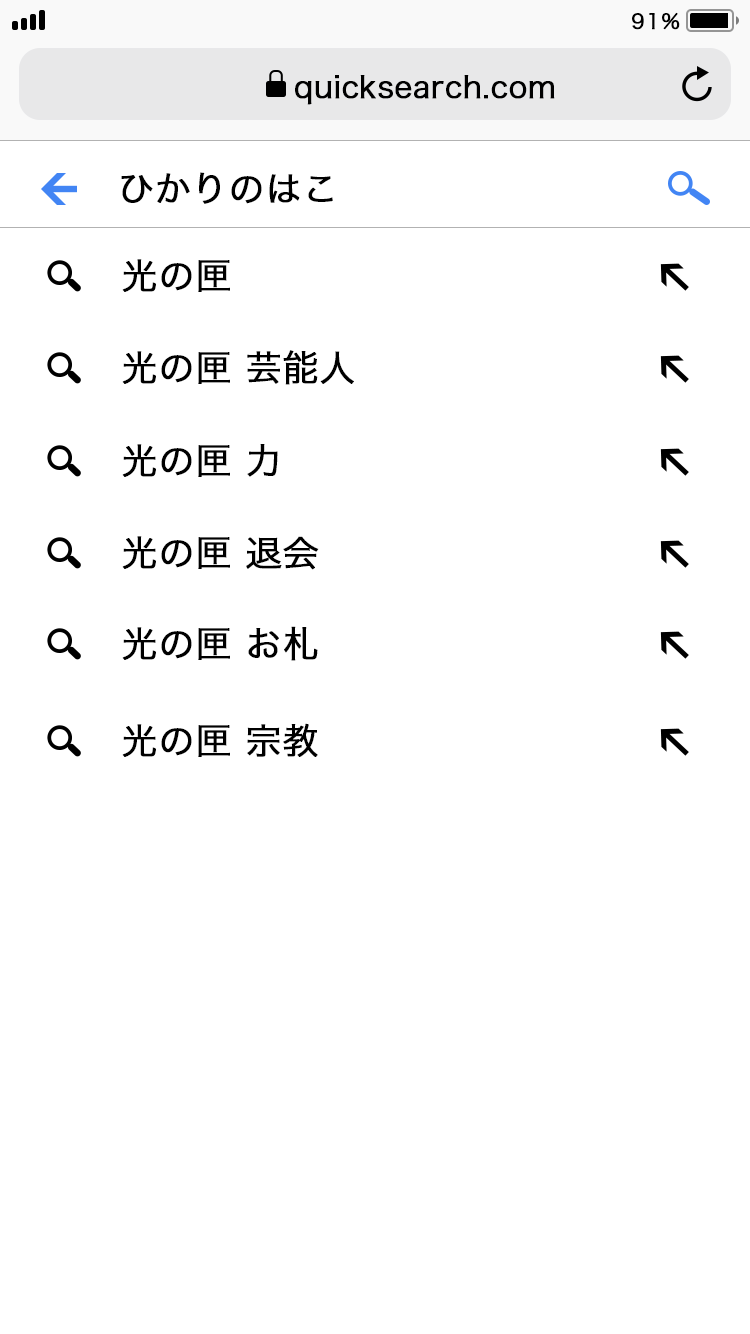
<style>
.page{position:relative;width:750px;height:1334px;background:#ffffff}
.page>*{position:absolute;margin:0}
.t1{font:20.7px "HiraginoSans-W3";letter-spacing:0.05em;color:#000000;font-weight:bold}
.t2{font:30px "HiraginoSans-W3";color:#000000;font-weight:bold}
.t3{font:36px "HiraginoSans-W3";color:#000000;font-weight:bold}
</style>
<div class="page">
<p class="t1" style="left:632px;top:12px;width:48px;height:18px">91%</p>
<p class="t2" style="left:295px;top:75px;width:260px;height:30px">quicksearch.com</p>
<p class="t3" style="left:121px;top:172px;width:212px;height:32px">ひかりのはこ</p>
<p class="t3" style="left:122px;top:259px;width:108px;height:33px">光の匣</p>
<p class="t3" style="left:122px;top:350px;width:232px;height:35px">光の匣 芸能人</p>
<p class="t3" style="left:122px;top:444px;width:156px;height:33px">光の匣 力</p>
<p class="t3" style="left:122px;top:536px;width:197px;height:34px">光の匣 退会</p>
<p class="t3" style="left:122px;top:626px;width:196px;height:35px">光の匣 お札</p>
<p class="t3" style="left:122px;top:723px;width:196px;height:34px">光の匣 宗教</p>
</div>
